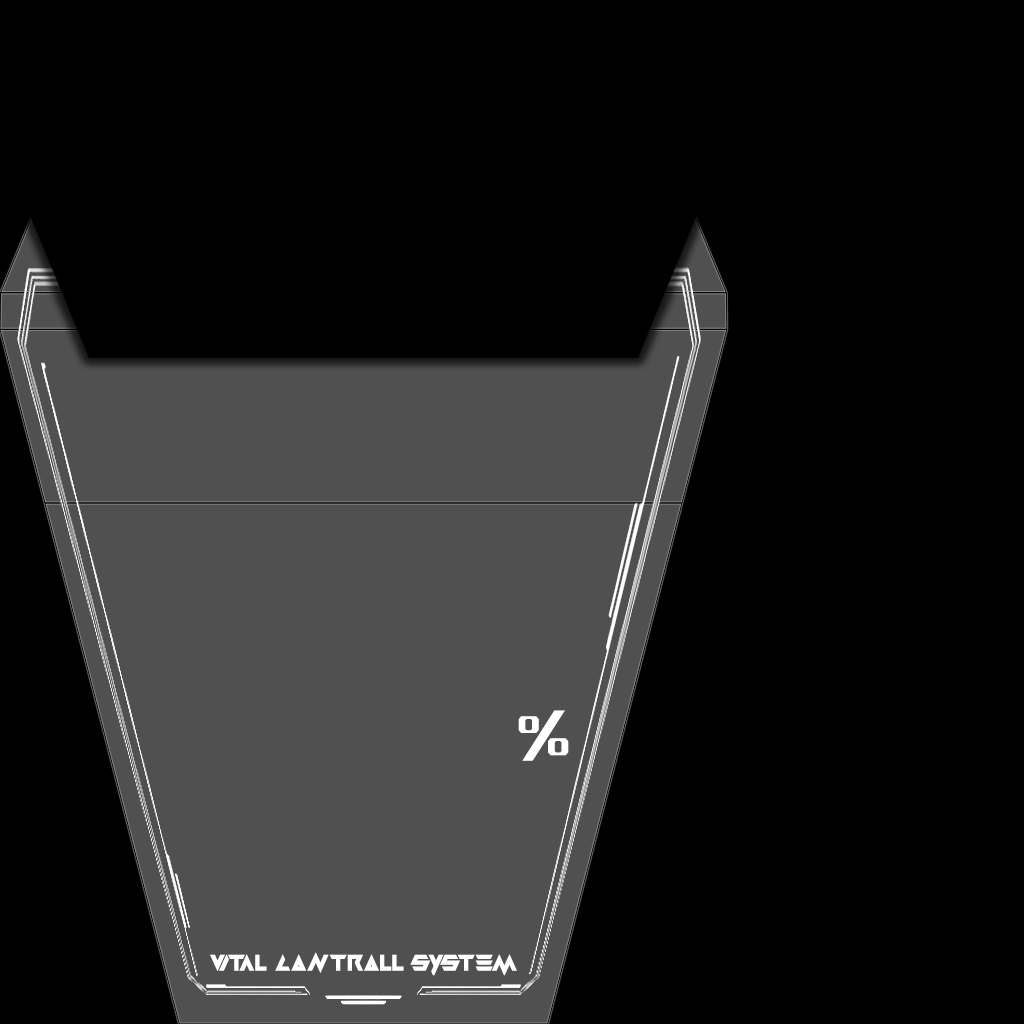
<style>
.page{position:relative;width:1024px;height:1024px;background:#000000}
.page>*{position:absolute;margin:0}
.t1{font:72px "ROGFonts-Regular";color:#ffffff}
.t2{font:22px "Masterblast";color:#ffffff}
</style>
<div class="page">
<p class="t1" style="left:518px;top:710px;width:51px;height:51px">%</p>
<p class="t2" style="left:210px;top:952px;width:307px;height:24px">vital  Controll  System</p>
</div>
